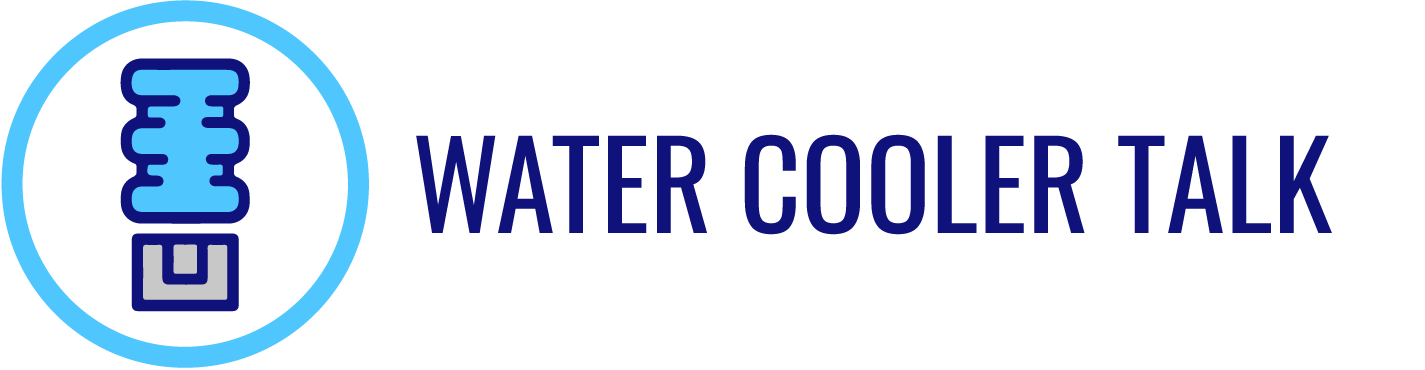
<style>
.page{position:relative;width:1425px;height:370px;background:#ffffff}
.page>*{position:absolute;margin:0}
.t1{font:120px "Oswald-Regular";color:#10127c}
</style>
<div class="page">
<p class="t1" style="left:416px;top:134px;width:916px;height:101px">WATER COOLER TALK</p>
</div>
